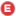
<style>
.page{position:relative;width:16px;height:16px;background:#ffffff}
.page>*{position:absolute;margin:0}
.t1{font:10px "Arial-BoldMT";letter-spacing:0.075em;color:#ffffff;text-transform:uppercase;font-weight:bold;scale:1.1 1}
</style>
<div class="page">
<p class="t1" style="left:4px;top:4px;width:7px;height:8px">E</p>
</div>
